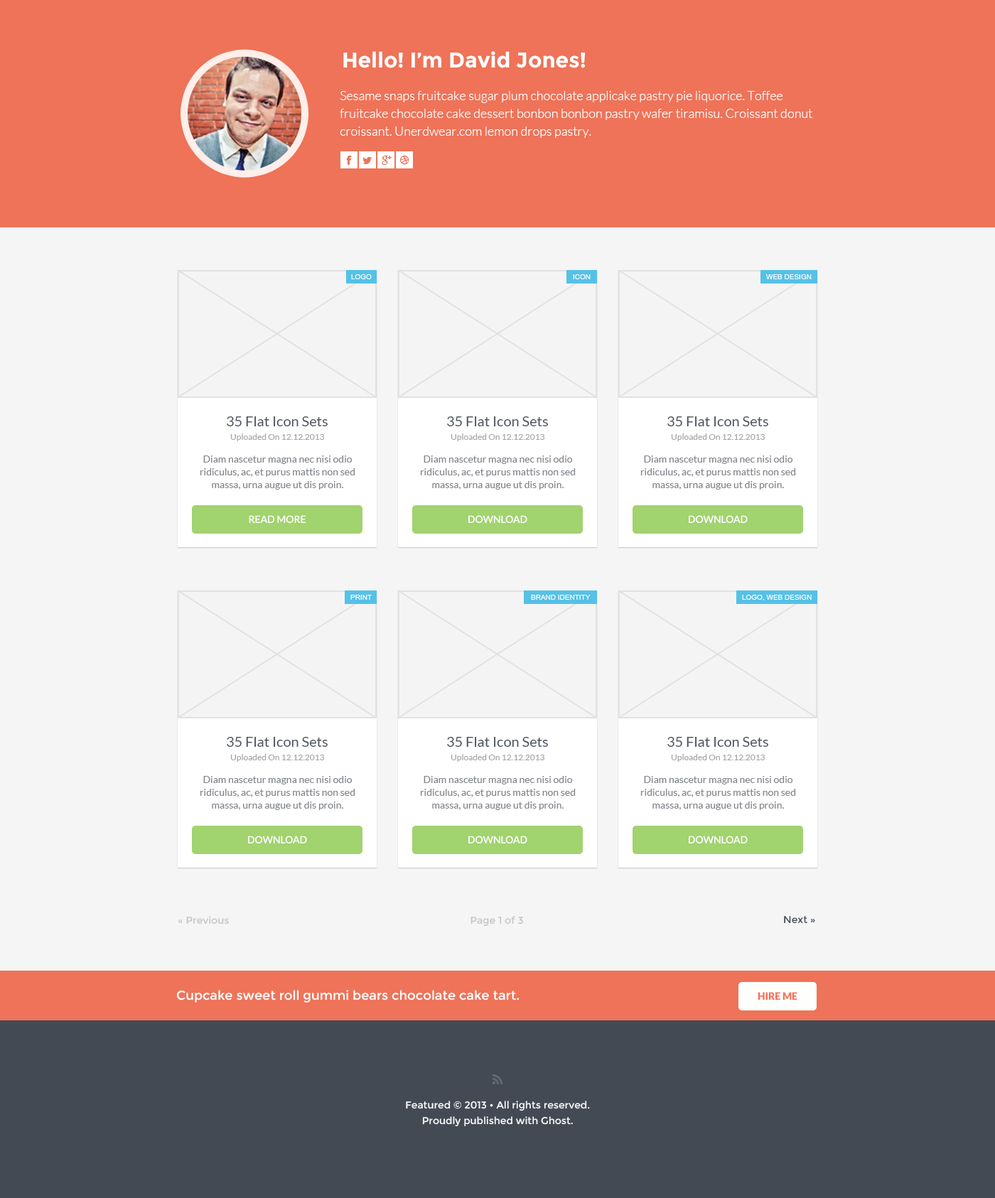
<style>
.page{position:relative;width:995px;height:1198px;background:#f5f5f5}
.page>*{position:absolute;margin:0}
.t1{font:21.3px "Montserrat-Bold";color:#ffffff}
.t2{font:12.8px/17.8px "Lato-Light";color:#ffffff}
.t3{font:7.1px "ArialMT";color:#ffffff;text-transform:uppercase}
.t4{font:14.2px "Lato-Regular";color:#505761}
.t5{font:8.5px "Lato-Regular";color:#a4a5a5}
.t6{font:10px/12.8px "Lato-Regular";color:#82868c}
.t7{font:10px "Lato-Regular";color:#ffffff;text-transform:uppercase}
.t8{font:10px "Montserrat-Regular";color:#c5c5c5}
.t9{font:10px "Montserrat-Regular";color:#434a54}
.t10{font:12.8px "Montserrat-Regular";color:#ffffff}
.t11{font:10px "Lato-Black";color:#fa6f57;text-transform:uppercase}
.t12{font:10px/15.6px "Montserrat-Regular";color:#f7f7f7}
</style>
<div class="page">
<p class="t1" style="left:343px;top:51px;width:242px;height:17px">Hello! I’m David Jones!</p>
<p class="t2" style="left:340px;top:91px;width:472px;height:47px">Sesame snaps fruitcake sugar plum chocolate applicake pastry pie liquorice. Toffee fruitcake chocolate cake dessert bonbon bonbon pastry wafer tiramisu. Croissant donut croissant. Unerdwear.com lemon drops pastry.</p>
<p class="t3" style="left:351px;top:274px;width:21px;height:5px">Logo</p>
<p class="t3" style="left:573px;top:274px;width:18px;height:5px">ICON</p>
<p class="t3" style="left:766px;top:274px;width:46px;height:5px">Web Design</p>
<p class="t4" style="left:227px;top:417px;width:101px;height:9px">35 Flat Icon Sets</p>
<p class="t4" style="left:447px;top:417px;width:101px;height:9px">35 Flat Icon Sets</p>
<p class="t4" style="left:667px;top:417px;width:101px;height:9px">35 Flat Icon Sets</p>
<p class="t5" style="left:230px;top:434px;width:94px;height:7px">Uploaded On 12.12.2013</p>
<p class="t5" style="left:451px;top:434px;width:93px;height:7px">Uploaded On 12.12.2013</p>
<p class="t5" style="left:671px;top:434px;width:94px;height:7px">Uploaded On 12.12.2013</p>
<p class="t6" style="left:200px;top:456px;width:155px;height:34px;text-align:center">Diam nascetur magna nec nisi odio ridiculus, ac, et purus mattis non sed massa, urna augue ut dis proin.</p>
<p class="t6" style="left:420px;top:456px;width:156px;height:34px;text-align:center">Diam nascetur magna nec nisi odio ridiculus, ac, et purus mattis non sed massa, urna augue ut dis proin.</p>
<p class="t6" style="left:640px;top:456px;width:156px;height:34px;text-align:center">Diam nascetur magna nec nisi odio ridiculus, ac, et purus mattis non sed massa, urna augue ut dis proin.</p>
<p class="t7" style="left:249px;top:515px;width:57px;height:8px">Read More</p>
<p class="t7" style="left:468px;top:515px;width:59px;height:8px">Download</p>
<p class="t7" style="left:689px;top:515px;width:59px;height:8px">Download</p>
<p class="t3" style="left:350px;top:595px;width:22px;height:5px">PRINT</p>
<p class="t3" style="left:531px;top:595px;width:60px;height:5px">Brand Identity</p>
<p class="t3" style="left:742px;top:595px;width:70px;height:6px">Logo, Web Design</p>
<p class="t4" style="left:227px;top:737px;width:101px;height:10px">35 Flat Icon Sets</p>
<p class="t4" style="left:447px;top:737px;width:101px;height:10px">35 Flat Icon Sets</p>
<p class="t4" style="left:667px;top:737px;width:101px;height:10px">35 Flat Icon Sets</p>
<p class="t5" style="left:230px;top:754px;width:94px;height:8px">Uploaded On 12.12.2013</p>
<p class="t5" style="left:451px;top:754px;width:93px;height:8px">Uploaded On 12.12.2013</p>
<p class="t5" style="left:671px;top:754px;width:94px;height:8px">Uploaded On 12.12.2013</p>
<p class="t6" style="left:200px;top:776px;width:155px;height:34px;text-align:center">Diam nascetur magna nec nisi odio ridiculus, ac, et purus mattis non sed massa, urna augue ut dis proin.</p>
<p class="t6" style="left:420px;top:776px;width:156px;height:34px;text-align:center">Diam nascetur magna nec nisi odio ridiculus, ac, et purus mattis non sed massa, urna augue ut dis proin.</p>
<p class="t6" style="left:640px;top:776px;width:156px;height:34px;text-align:center">Diam nascetur magna nec nisi odio ridiculus, ac, et purus mattis non sed massa, urna augue ut dis proin.</p>
<p class="t7" style="left:248px;top:836px;width:59px;height:8px">Download</p>
<p class="t7" style="left:468px;top:836px;width:59px;height:8px">Download</p>
<p class="t7" style="left:689px;top:836px;width:59px;height:8px">Download</p>
<p class="t8" style="left:178px;top:916px;width:51px;height:9px">« Previous</p>
<p class="t8" style="left:471px;top:916px;width:52px;height:11px">Page 1 of 3</p>
<p class="t9" style="left:784px;top:916px;width:31px;height:8px">Next »</p>
<p class="t10" style="left:176px;top:990px;width:344px;height:13px">Cupcake sweet roll gummi bears chocolate cake tart.</p>
<p class="t11" style="left:758px;top:992px;width:39px;height:8px">Hire Me</p>
<p class="t12" style="left:406px;top:1101px;width:184px;height:26px;text-align:center">Featured © 2013 • All rights reserved.<br>Proudly published with Ghost.</p>
</div>
